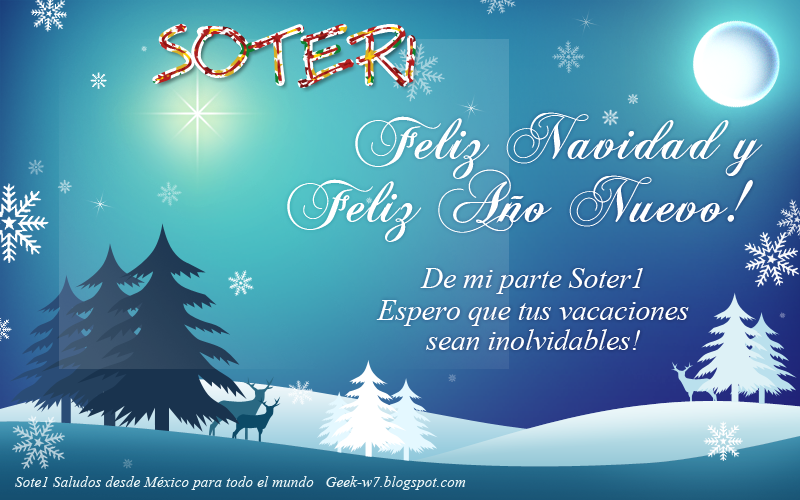
<style>
.page{position:relative;width:800px;height:500px}
.page>*{position:absolute;margin:0}
.t1{font:60px "BigMisterC";letter-spacing:0.025em}
.t2{font:60px "ChopinScript";letter-spacing:0.025em;color:#ffffff}
.t3{font:30px "TimesNewRomanPS-ItalicMT";letter-spacing:-0.01em;color:#ffffff}
.t4{font:30px/30px "TimesNewRomanPS-ItalicMT";letter-spacing:-0.01em;color:#ffffff}
.t5{font:15px "TimesNewRomanPS-ItalicMT";letter-spacing:0.01em;color:#ebf6f8}
</style>
<div class="page">
<p class="t1" style="left:155px;top:27px;width:258px;height:58px">SOTER1</p>
<p class="t2" style="left:355px;top:112px;width:408px;height:67px">Feliz Navidad y</p>
<p class="t2" style="left:287px;top:169px;width:466px;height:73px">Feliz Año Nuevo!</p>
<p class="t3" style="left:420px;top:268px;width:223px;height:26px">De mi parte Soter1</p>
<p class="t4" style="left:376px;top:300px;width:313px;height:50px;text-align:center">Espero que tus vacaciones<br>sean inolvidables!</p>
<p class="t5" style="left:15px;top:476px;width:451px;height:14px">Sote1 Saludos desde México para todo el mundo   Geek-w7.blogspot.com</p>
</div>
